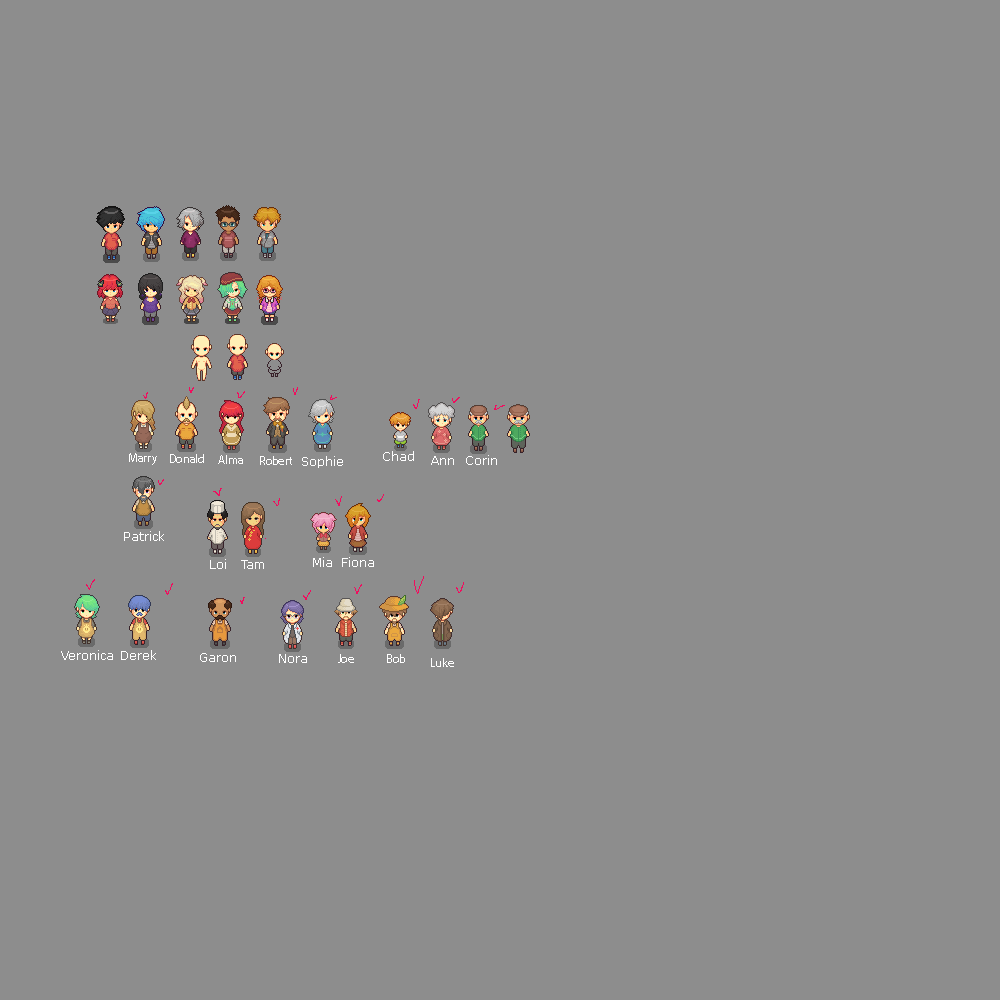
<style>
.page{position:relative;width:1000px;height:1000px;background:#8d8d8d}
.page>*{position:absolute;margin:0}
.t1{font:12px "MyriadPro-Regular";color:#ffffff}
.t2{font:12px "Verdana";color:#ffffff}
</style>
<div class="page">
<p class="t1" style="left:129px;top:453px;width:28px;height:12px">Marry</p>
<p class="t1" style="left:170px;top:454px;width:34px;height:9px">Donald</p>
<p class="t1" style="left:218px;top:455px;width:25px;height:9px">Alma</p>
<p class="t1" style="left:260px;top:456px;width:32px;height:9px">Robert</p>
<p class="t2" style="left:302px;top:456px;width:41px;height:12px">Sophie</p>
<p class="t2" style="left:383px;top:451px;width:31px;height:10px">Chad</p>
<p class="t2" style="left:431px;top:456px;width:23px;height:9px">Ann</p>
<p class="t2" style="left:466px;top:455px;width:31px;height:10px">Corin</p>
<p class="t2" style="left:124px;top:531px;width:40px;height:10px">Patrick</p>
<p class="t2" style="left:313px;top:557px;width:19px;height:10px">Mia</p>
<p class="t2" style="left:342px;top:557px;width:32px;height:10px">Fiona</p>
<p class="t2" style="left:210px;top:559px;width:16px;height:10px">Loi</p>
<p class="t2" style="left:241px;top:560px;width:23px;height:9px">Tam</p>
<p class="t2" style="left:61px;top:650px;width:52px;height:10px">Veronica</p>
<p class="t2" style="left:121px;top:650px;width:35px;height:10px">Derek</p>
<p class="t2" style="left:200px;top:653px;width:36px;height:9px">Garon</p>
<p class="t2" style="left:279px;top:654px;width:28px;height:9px">Nora</p>
<p class="t1" style="left:338px;top:654px;width:16px;height:9px">Joe</p>
<p class="t1" style="left:387px;top:654px;width:18px;height:9px">Bob</p>
<p class="t1" style="left:431px;top:658px;width:23px;height:9px">Luke</p>
</div>
